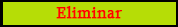
<style>
.page{position:relative;width:178px;height:27px;background:#b6dd06}
.page>*{position:absolute;margin:0}
.t1{font:17px "Sylfaen";color:#ff0000;font-weight:bold}
</style>
<div class="page">
<p class="t1" style="left:56px;top:6px;width:67px;height:13px">Eliminar</p>
</div>
